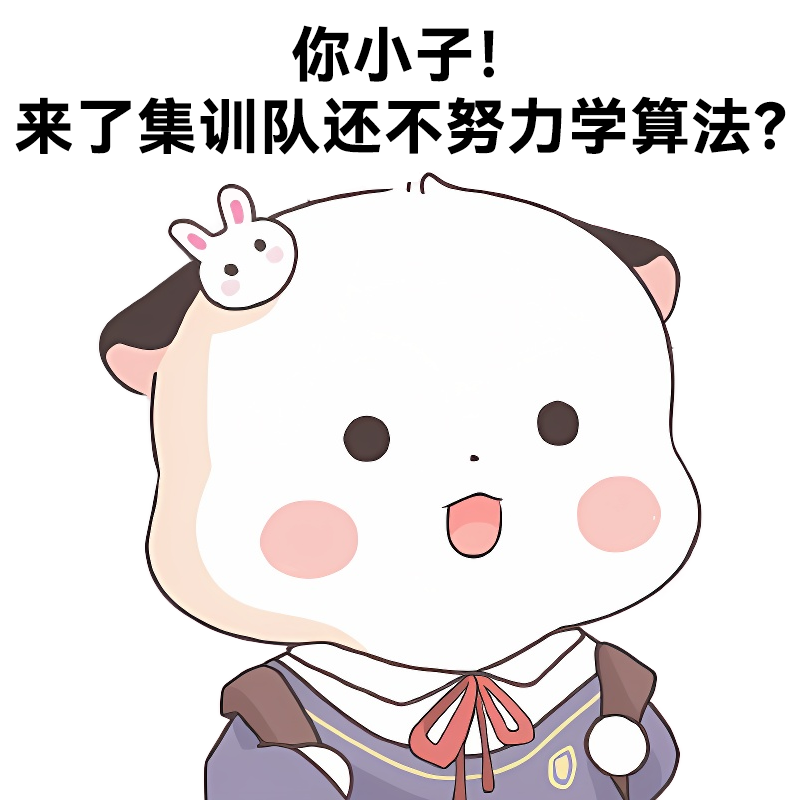
<style>
.page{position:relative;width:800px;height:800px;background:#ffffff}
.page>*{position:absolute;margin:0}
.t1{font:60px "HarmonyOS_Sans_SC_Bold";color:#000000;font-weight:bold}
</style>
<div class="page">
<p class="t1" style="left:15px;top:25px;width:771px;height:130px;text-align:center">你小子！<br>来了集训队还不努力学算法？</p>
</div>
